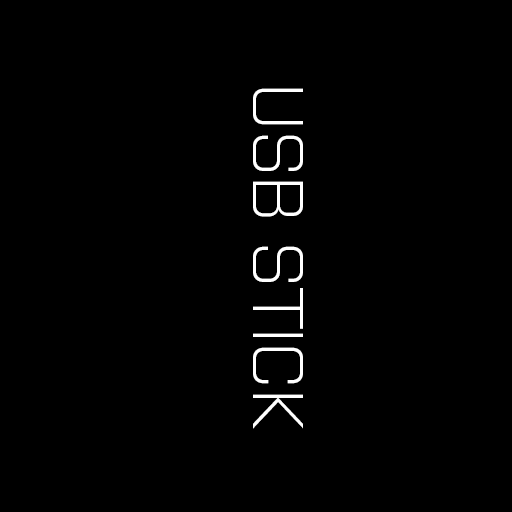
<style>
.page{position:relative;width:512px;height:512px;background:#000000}
.page>*{position:absolute;margin:0}
.t1{font:72px "Purista-Light";color:#ffffff}
</style>
<div class="page">
<p class="t1" style="left:253px;top:88px;width:50px;height:341px;rotate:90deg">USB STICK</p>
</div>
